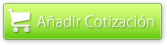
<style>
.page{position:relative;width:167px;height:45px}
.page>*{position:absolute;margin:0}
.t1{font:15px "KozGoPr6N-Regular";color:#ffffff}
</style>
<div class="page">
<p class="t1" style="left:37px;top:15px;width:117px;height:13px">Añadir Cotización</p>
</div>
